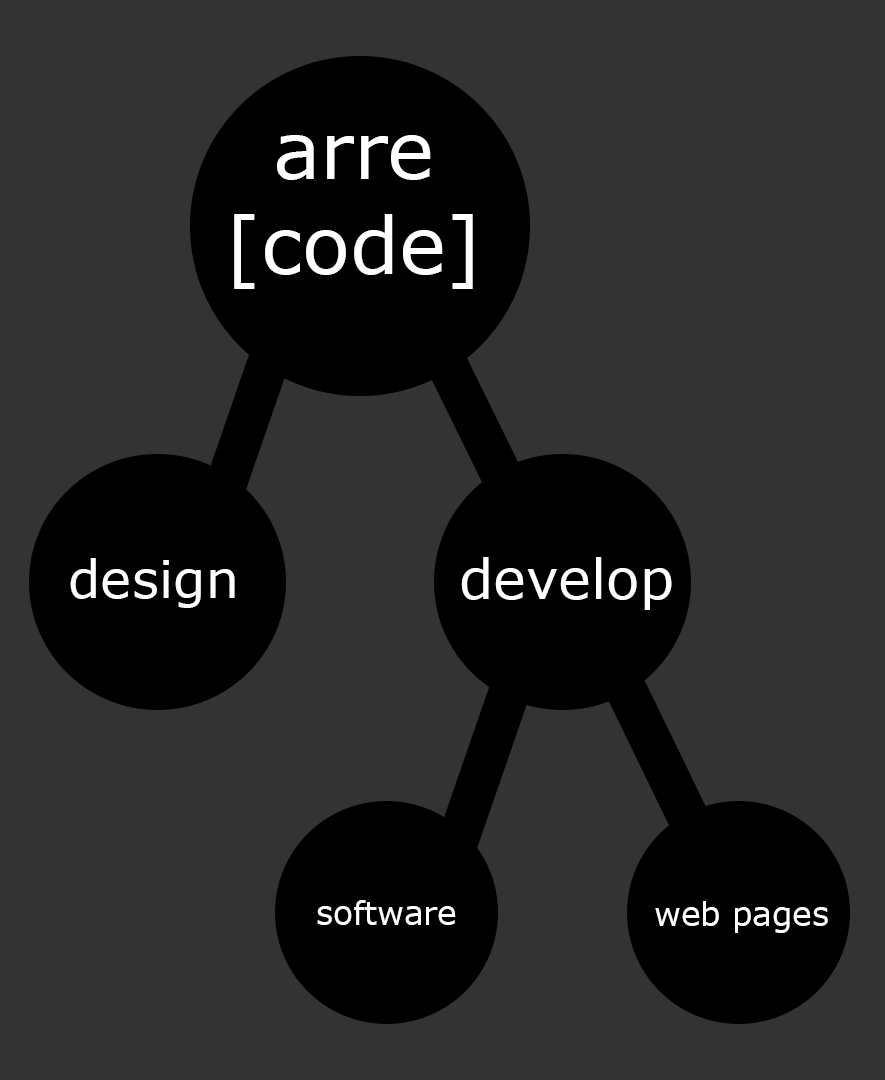
<style>
.page{position:relative;width:885px;height:1080px;background:#333333}
.page>*{position:absolute;margin:0}
.t1{font:78.8px "Verdana";color:#ffffff}
.t2{font:52.3px "Verdana";color:#ffffff}
.t3{font:55.2px "Verdana";color:#ffffff}
.t4{font:32.5px "Verdana";color:#ffffff}
</style>
<div class="page">
<p class="t1" style="left:234px;top:135px;width:239px;height:154px;text-align:center">arre<br>[code]</p>
<p class="t2" style="left:70px;top:558px;width:165px;height:50px">design</p>
<p class="t3" style="left:461px;top:557px;width:211px;height:53px">develop</p>
<p class="t4" style="left:317px;top:900px;width:139px;height:25px">software</p>
<p class="t4" style="left:655px;top:901px;width:173px;height:32px">web pages</p>
</div>
